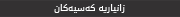
<style>
.page{position:relative;width:180px;height:17px;background:#333132}
.page>*{position:absolute;margin:0}
.t1{font:9px "DroidArabicKufi";color:#ffffff}
</style>
<div class="page">
<p class="t1" style="left:54px;top:4px;width:71px;height:9px">زانیاریە کەسیەکان</p>
</div>
